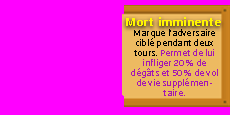
<style>
.page{position:relative;width:230px;height:115px;background:#ff00ff}
.page>*{position:absolute;margin:0}
.t1{font:12px "Ebrima-Bold";letter-spacing:0.025em;color:#fff600}
.t2{font:9px/10px "Ebrima";letter-spacing:0.02em;color:#a517b2}
.t3{font:9px/10px "Ebrima";letter-spacing:0.02em;color:#000000}
</style>
<div class="page">
<p class="t1" style="left:126px;top:17px;width:95px;height:9px">Mort imminente</p>
<p class="t2" style="left:131px;top:29px;width:87px;height:67px;text-align:center"><span class="t3">Marque l’adversaire ciblé pendant deux tours. </span>Permet de lui infliger 20 % de dégâts et 50 % de vol de vie supplémentaire.</p>
</div>
